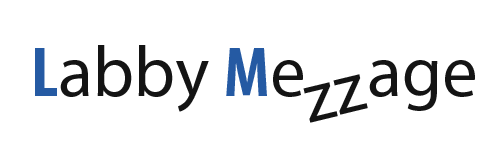
<style>
.page{position:relative;width:500px;height:150px;background:#ffffff}
.page>*{position:absolute;margin:0}
.t1{font:71.8px "MyriadPro-Regular";color:#141414}
.t2{font:71.8px "MyriadPro-BoldCond";color:#255aa3}
.t3{font:72px "MyriadPro-Regular";color:#141414}
</style>
<div class="page">
<p class="t1" style="left:35px;top:45px;width:440px;height:67px"><span class="t2">L</span>abby <span class="t2">M</span>e    age</p>
<p class="t3" style="left:303px;top:74px;width:65px;height:49px;rotate:-14deg">zz</p>
</div>
